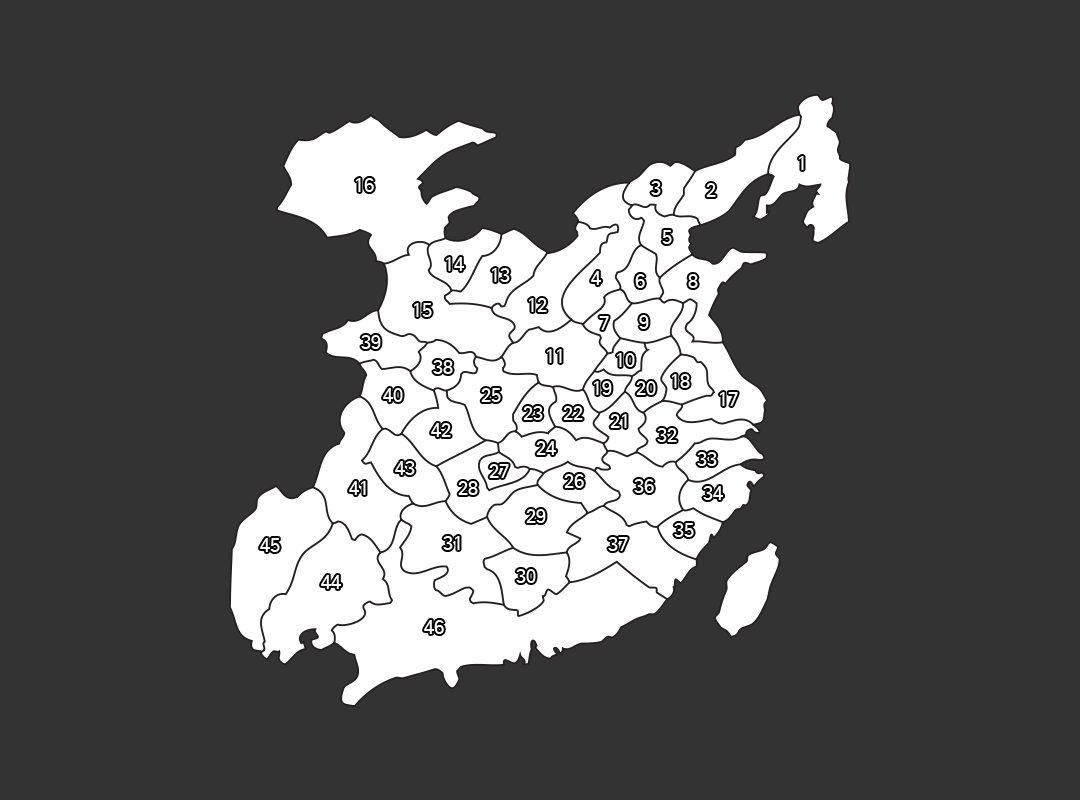
<style>
.page{position:relative;width:1080px;height:800px;background:#333333}
.page>*{position:absolute;margin:0}
.t1{font:20px "SeoulNamsanB";color:#ffffff}
</style>
<div class="page">
<p class="t1" style="left:798px;top:156px;width:6px;height:14px">1</p>
<p class="t1" style="left:355px;top:178px;width:19px;height:14px">16</p>
<p class="t1" style="left:651px;top:181px;width:10px;height:14px">3</p>
<p class="t1" style="left:706px;top:183px;width:10px;height:14px">2</p>
<p class="t1" style="left:662px;top:230px;width:10px;height:14px">5</p>
<p class="t1" style="left:445px;top:257px;width:20px;height:14px">14</p>
<p class="t1" style="left:491px;top:268px;width:19px;height:14px">13</p>
<p class="t1" style="left:591px;top:271px;width:11px;height:14px">4</p>
<p class="t1" style="left:635px;top:274px;width:10px;height:14px">6</p>
<p class="t1" style="left:688px;top:274px;width:10px;height:14px">8</p>
<p class="t1" style="left:413px;top:303px;width:19px;height:14px">15</p>
<p class="t1" style="left:528px;top:298px;width:19px;height:14px">12</p>
<p class="t1" style="left:599px;top:316px;width:10px;height:14px">7</p>
<p class="t1" style="left:639px;top:315px;width:10px;height:14px">9</p>
<p class="t1" style="left:361px;top:335px;width:20px;height:14px">39</p>
<p class="t1" style="left:546px;top:349px;width:16px;height:14px">11</p>
<p class="t1" style="left:616px;top:353px;width:19px;height:14px">10</p>
<p class="t1" style="left:433px;top:360px;width:20px;height:14px">38</p>
<p class="t1" style="left:671px;top:374px;width:19px;height:14px">18</p>
<p class="t1" style="left:383px;top:388px;width:20px;height:14px">40</p>
<p class="t1" style="left:481px;top:388px;width:20px;height:14px">25</p>
<p class="t1" style="left:593px;top:381px;width:19px;height:14px">19</p>
<p class="t1" style="left:636px;top:381px;width:20px;height:14px">20</p>
<p class="t1" style="left:719px;top:392px;width:19px;height:14px">17</p>
<p class="t1" style="left:523px;top:406px;width:20px;height:14px">23</p>
<p class="t1" style="left:563px;top:406px;width:20px;height:14px">22</p>
<p class="t1" style="left:610px;top:414px;width:17px;height:14px">21</p>
<p class="t1" style="left:431px;top:423px;width:20px;height:14px">42</p>
<p class="t1" style="left:657px;top:428px;width:20px;height:14px">32</p>
<p class="t1" style="left:536px;top:441px;width:21px;height:14px">24</p>
<p class="t1" style="left:395px;top:461px;width:20px;height:14px">43</p>
<p class="t1" style="left:697px;top:452px;width:20px;height:14px">33</p>
<p class="t1" style="left:489px;top:464px;width:20px;height:14px">27</p>
<p class="t1" style="left:349px;top:481px;width:17px;height:14px">41</p>
<p class="t1" style="left:458px;top:481px;width:20px;height:14px">28</p>
<p class="t1" style="left:564px;top:474px;width:20px;height:14px">26</p>
<p class="t1" style="left:634px;top:479px;width:20px;height:14px">36</p>
<p class="t1" style="left:703px;top:486px;width:21px;height:14px">34</p>
<p class="t1" style="left:526px;top:509px;width:20px;height:14px">29</p>
<p class="t1" style="left:674px;top:523px;width:20px;height:14px">35</p>
<p class="t1" style="left:260px;top:538px;width:20px;height:14px">45</p>
<p class="t1" style="left:443px;top:536px;width:17px;height:14px">31</p>
<p class="t1" style="left:608px;top:537px;width:20px;height:14px">37</p>
<p class="t1" style="left:516px;top:569px;width:20px;height:14px">30</p>
<p class="t1" style="left:321px;top:575px;width:21px;height:14px">44</p>
<p class="t1" style="left:424px;top:620px;width:20px;height:14px">46</p>
</div>
